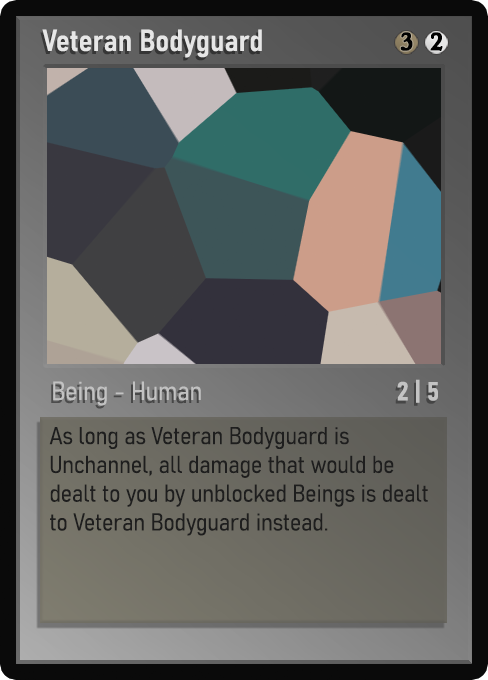
<style>
.page{position:relative;width:488px;height:680px}
.page>*{position:absolute;margin:0}
.t1{font:30px "Bahnschrift-SemiBoldSemiCondensed";color:#f2f2f2;font-weight:bold}
.t2{font:25px "WTRRoycroft";color:#000000;font-weight:bold;scale:1.09 1}
.t3{font:26px "Bahnschrift-LightSemiCondensed";color:#c8c8c8;font-weight:bold}
.t4{font:26px "Bahnschrift-BoldSemiCondensed";color:#c3c3c3;font-weight:bold}
.t5{font:24px "Bahnschrift-LightSemiCondensed";color:#1e1e1e;font-weight:bold}
</style>
<div class="page">
<p class="t1" style="left:42px;top:29px;width:220px;height:29px;opacity:0.9">Veteran Bodyguard</p>
<p class="t2" style="left:400px;top:32px;width:13px;height:19px">3</p>
<p class="t2" style="left:430px;top:32px;width:13px;height:19px">2</p>
<p class="t3" style="left:53px;top:381px;width:148px;height:25px;opacity:0.9">Being - Human</p>
<p class="t4" style="left:397px;top:379px;width:41px;height:24px">2 | 5</p>
<p class="t5" style="left:49px;top:427px;width:379px;height:109px">As long as Veteran Bodyguard is Unchannel, all damage that would be dealt to you by unblocked Beings is dealt to Veteran Bodyguard instead.</p>
</div>
